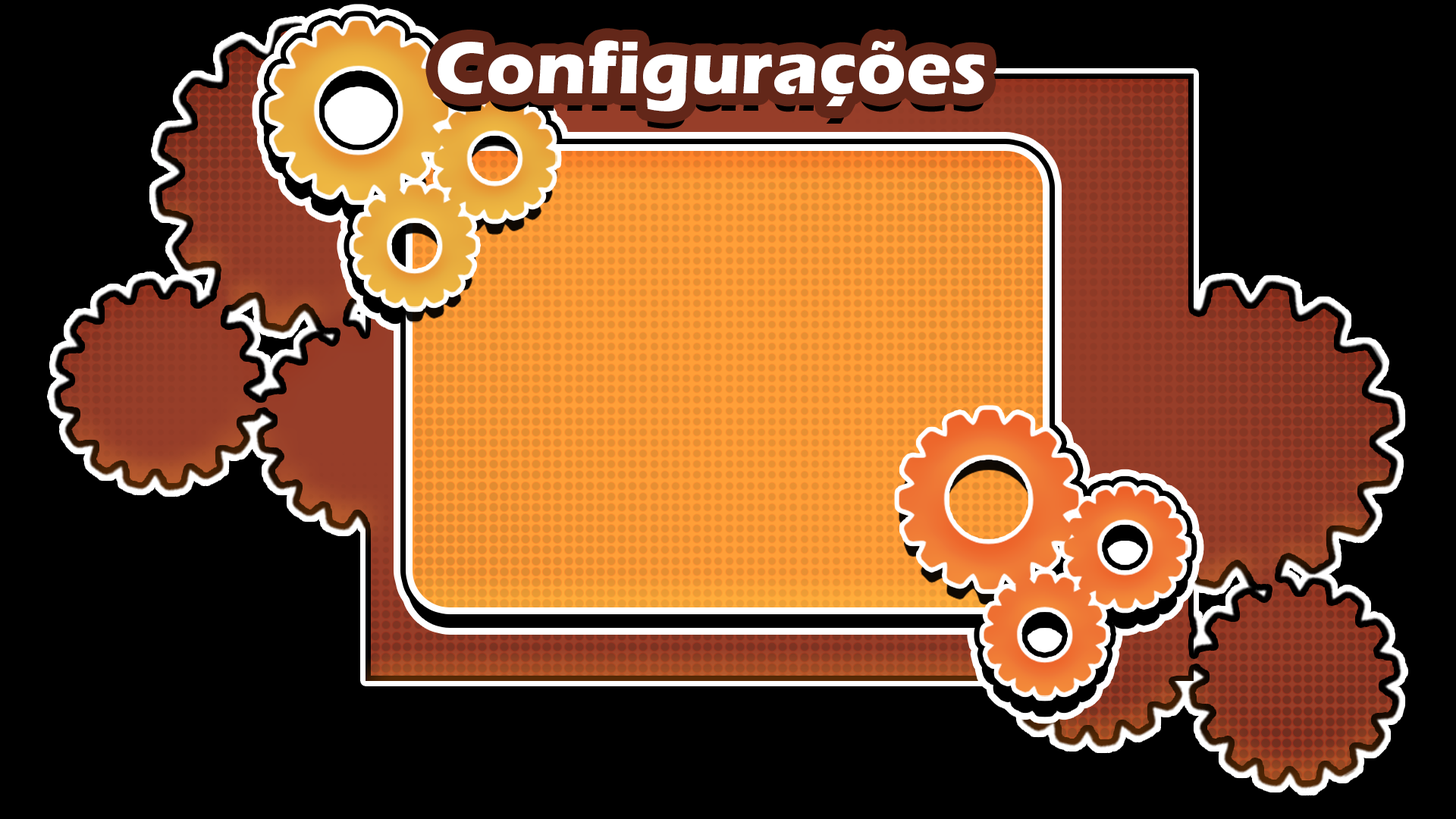
<style>
.page{position:relative;width:1456px;height:819px;background:#000000}
.page>*{position:absolute;margin:0}
.t1{font:75.8px "ErasITC-Bold";color:#ffffff}
</style>
<div class="page">
<p class="t1" style="left:438px;top:40px;width:547px;height:71px">Configurações</p>
</div>
